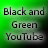
<style>
.page{position:relative;width:48px;height:48px}
.page>*{position:absolute;margin:0}
.t1{font:10.4px "MyriadPro-Regular"}
</style>
<div class="page">
<p class="t1" style="left:4px;top:7px;width:41px;height:33px;text-align:center">Black and Green<br>YouTube</p>
</div>
